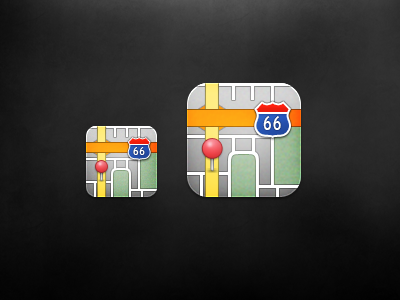
<style>
.page{position:relative;width:400px;height:300px}
.page>*{position:absolute;margin:0}
.t1{font:19.2px "BlueHighwayDType";letter-spacing:0.1em;color:#ffffff}
.t2{font:12px "BlueHighwayDType";letter-spacing:0.1em;color:#ffffff}
</style>
<div class="page">
<p class="t1" style="left:263px;top:116px;width:18px;height:14px">66</p>
<p class="t2" style="left:133px;top:147px;width:12px;height:8px">66</p>
</div>
